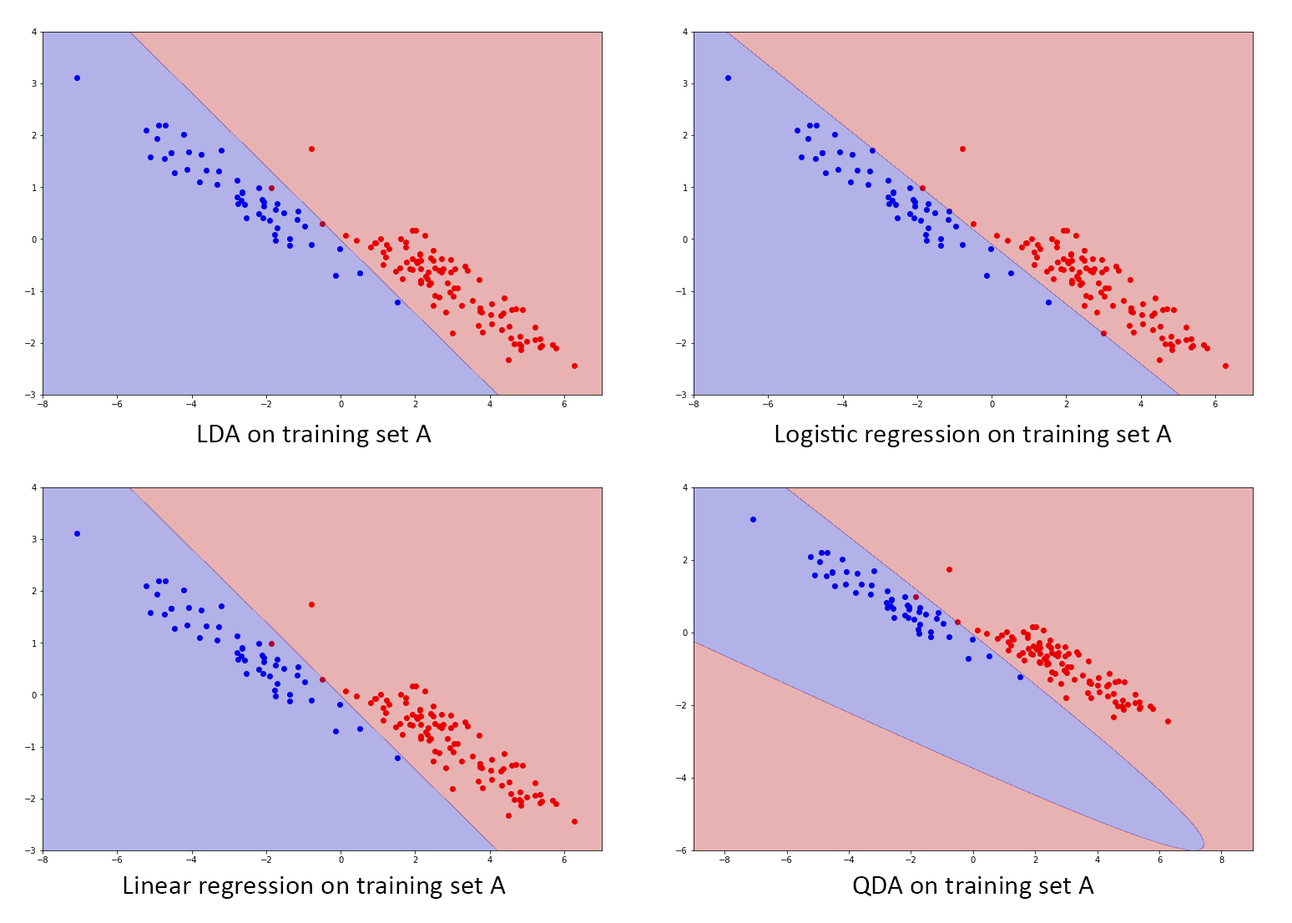
<style>
.page{position:relative;width:1292px;height:923px;background:#e8b2b2}
.page>*{position:absolute;margin:0}
.t1{font:27.8px "Calibri";color:#000000}
</style>
<div class="page">
<p class="t1" style="left:198px;top:425px;width:233px;height:22px">LDA on training set A</p>
<p class="t1" style="left:775px;top:425px;width:397px;height:22px">Logistic regression on training set A</p>
<p class="t1" style="left:124px;top:876px;width:382px;height:23px">Linear regression on training set A</p>
<p class="t1" style="left:853px;top:876px;width:241px;height:23px">QDA on training set A</p>
</div>
